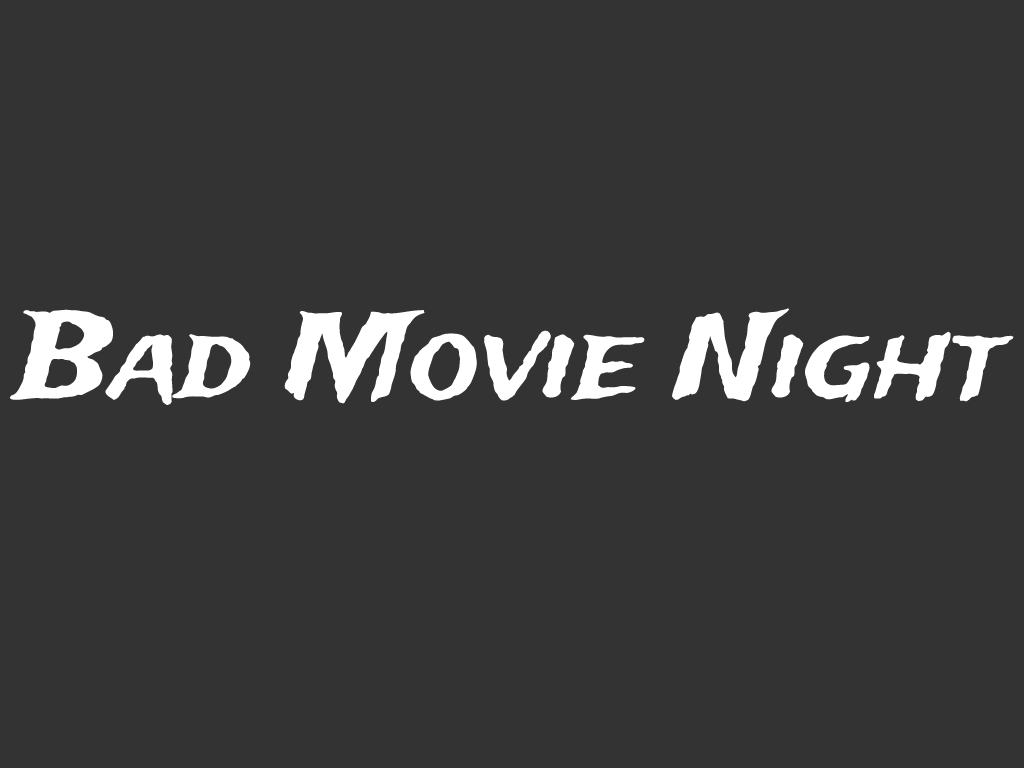
<style>
.page{position:relative;width:1024px;height:768px;background:#333333}
.page>*{position:absolute;margin:0}
.t1{font:118px "TradeWinds";color:#ffffff}
</style>
<div class="page">
<p class="t1" style="left:9px;top:308px;width:1005px;height:97px">Bad Movie Night</p>
</div>
